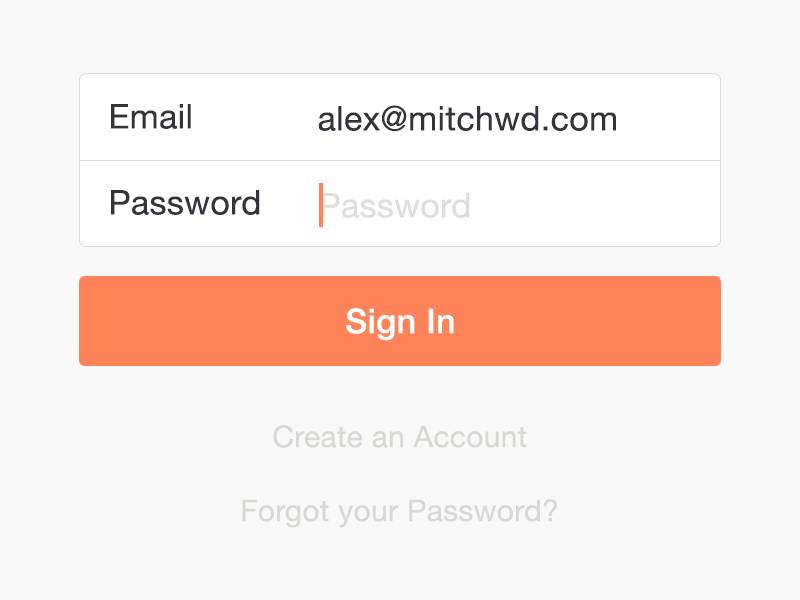
<style>
.page{position:relative;width:800px;height:600px;background:#f8f8f8}
.page>*{position:absolute;margin:0}
.t1{font:34px "HelveticaNeue";letter-spacing:0.01em;color:#33333c}
.t2{font:34px "HelveticaNeue";letter-spacing:0.01em;color:#dfdedb}
.t3{font:34px "HelveticaNeue-Medium";letter-spacing:0.01em;color:#ffffff}
.t4{font:30px "HelveticaNeue";letter-spacing:0.01em;color:#d8d7d4}
</style>
<div class="page">
<p class="t1" style="left:111px;top:104px;width:80px;height:25px">Email</p>
<p class="t1" style="left:318px;top:105px;width:298px;height:27px">alex@mitchwd.com</p>
<p class="t1" style="left:111px;top:190px;width:149px;height:25px">Password</p>
<p class="t2" style="left:321px;top:193px;width:149px;height:25px">Password</p>
<p class="t3" style="left:346px;top:308px;width:108px;height:33px">Sign In</p>
<p class="t4" style="left:273px;top:425px;width:254px;height:23px">Create an Account</p>
<p class="t4" style="left:242px;top:499px;width:315px;height:29px">Forgot your Password?</p>
</div>
